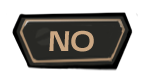
<style>
.page{position:relative;width:145px;height:83px;background:#ffffff}
.page>*{position:absolute;margin:0}
.t1{font:30px "037-CAI978";color:#cba783}
</style>
<div class="page">
<p class="t1" style="left:49px;top:30px;width:45px;height:22px">NO</p>
</div>
